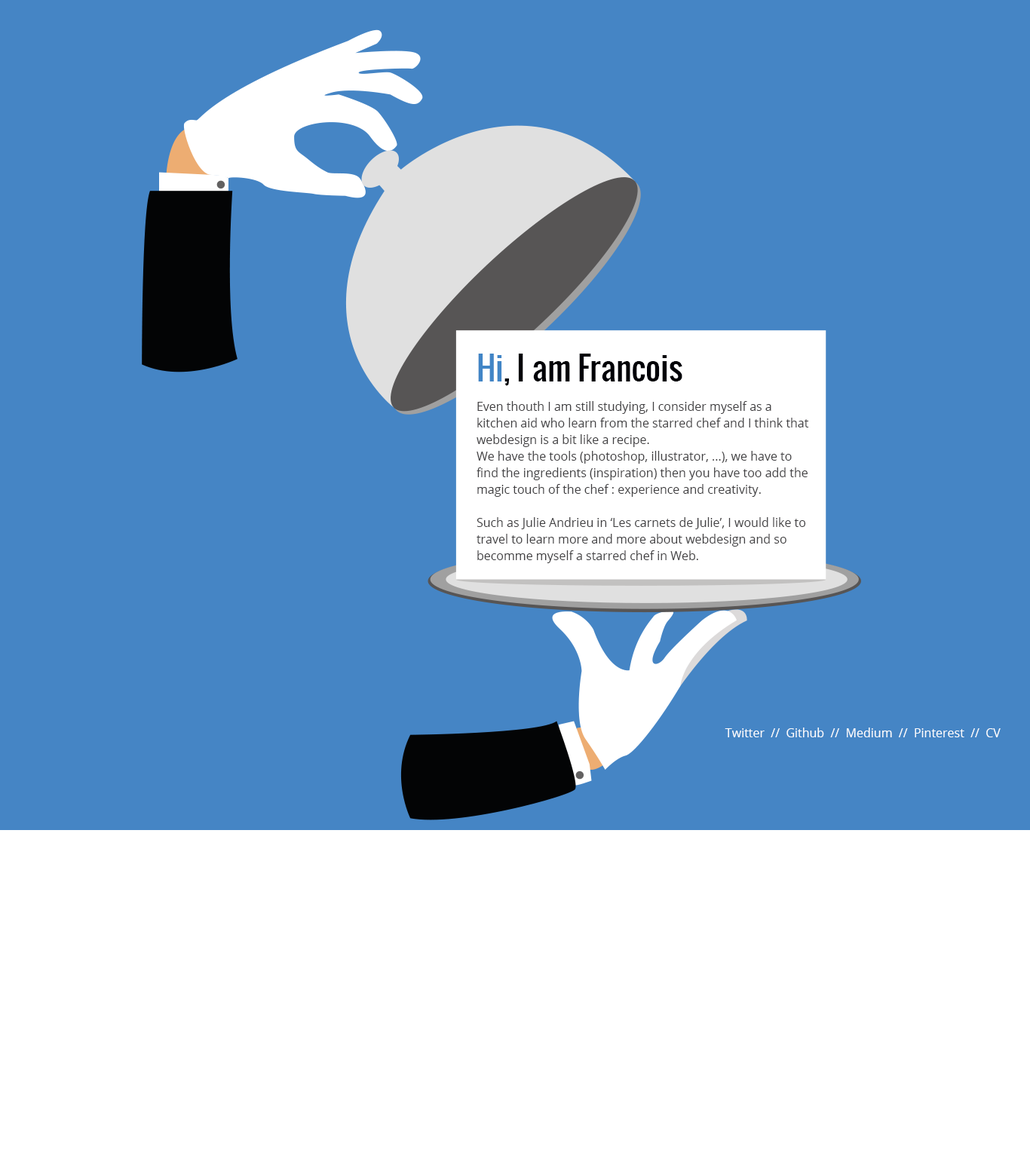
<style>
.page{position:relative;width:1030px;height:1158px;background:#4585c5}
.page>*{position:absolute;margin:0}
.t1{font:32.4px "Oswald-Regular";color:#000007}
.t2{font:32.4px "Oswald-Regular";color:#4185c6}
.t3{font:12.1px/16.6px "OpenSans";color:#414042}
.t4{font:12.1px "OpenSans";color:#ffffff}
</style>
<div class="page">
<p class="t1" style="left:478px;top:354px;width:204px;height:32px"><span class="t2">Hi</span>, I am Francois</p>
<p class="t3" style="left:476px;top:401px;width:333px;height:162px">Even thouth I am still studying, I consider myself as a kitchen aid who learn from the starred chef and I think that webdesign is a bit like a recipe. <br>We have the tools (photoshop, illustrator, ...), we have to find the ingredients (inspiration) then you have too add the magic touch of the chef : experience and creativity.<br><br>Such as Julie Andrieu in ‘Les carnets de Julie’, I would like to travel to learn more and more about webdesign and so becomme myself a starred chef in Web.</p>
<p class="t4" style="left:724px;top:727px;width:276px;height:10px">Twitter  //  Github  //  Medium  //  Pinterest  //  CV</p>
</div>
